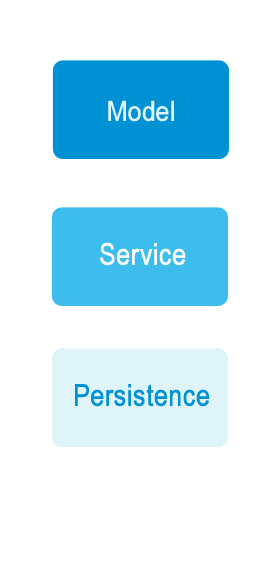
<style>
.page{position:relative;width:267px;height:577px;background:#ffffff}
.page>*{position:absolute;margin:0}
.t1{font:27.5px "ArialNarrow";color:#dff4f9;font-weight:bold;scale:1.09 1}
.t2{font:27.5px "ArialNarrow";color:#030303;font-weight:bold;scale:1.09 1}
.t3{font:30px "ArialNarrow";color:#fcfdfd;font-weight:bold}
.t4{font:30px "ArialNarrow";color:#0091d5;font-weight:bold}
</style>
<div class="page">
<p class="t1" style="left:108px;top:100px;width:66px;height:22px"><span class="t2"><br></span>Model</p>
<p class="t3" style="left:100px;top:242px;width:86px;height:24px">Service</p>
<p class="t4" style="left:75px;top:384px;width:135px;height:23px">Persistence</p>
</div>
